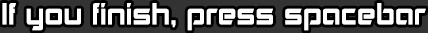
<style>
.page{position:relative;width:428px;height:33px;background:#333333}
.page>*{position:absolute;margin:0}
.t1{font:29.2px "Akashi";color:#ffffff;scale:0.95 1}
</style>
<div class="page">
<p class="t1" style="left:2px;top:3px;width:424px;height:28px">If you finish, press spacebar</p>
</div>
